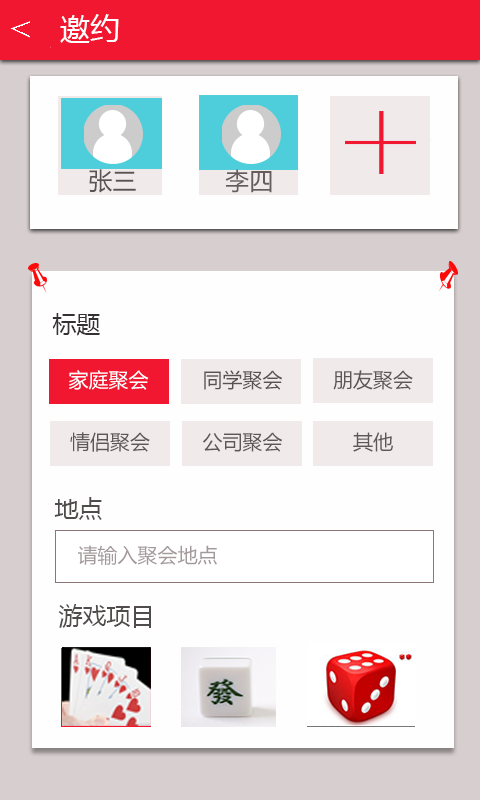
<style>
.page{position:relative;width:480px;height:800px;background:#fffefe}
.page>*{position:absolute;margin:0}
.t1{font:30px "MicrosoftYaHei";color:#ffffff}
.t2{font:24px "MicrosoftYaHei";color:#5a5253}
.t3{font:24px "MicrosoftYaHei";color:#655d5d}
.t4{font:24px "MicrosoftYaHei";color:#353031}
.t5{font:20px "MicrosoftYaHei";color:#ffffff}
.t6{font:20px "MicrosoftYaHei";color:#595253}
.t7{font:20px "MicrosoftYaHei";color:#5e5657}
.t8{font:24px "MicrosoftYaHei";color:#504c4c}
.t9{font:20px "MicrosoftYaHei";color:#a3999b}
</style>
<div class="page">
<p class="t1" style="left:60px;top:14px;width:59px;height:29px">邀约</p>
<p class="t2" style="left:89px;top:169px;width:47px;height:24px">张三</p>
<p class="t3" style="left:225px;top:169px;width:47px;height:24px">李四</p>
<p class="t4" style="left:52px;top:313px;width:48px;height:23px">标题</p>
<p class="t5" style="left:69px;top:370px;width:80px;height:20px">家庭聚会</p>
<p class="t6" style="left:204px;top:370px;width:79px;height:20px">同学聚会</p>
<p class="t7" style="left:333px;top:370px;width:80px;height:20px">朋友聚会</p>
<p class="t7" style="left:70px;top:432px;width:80px;height:20px">情侣聚会</p>
<p class="t7" style="left:203px;top:432px;width:80px;height:20px">公司聚会</p>
<p class="t7" style="left:353px;top:432px;width:40px;height:20px">其他</p>
<p class="t8" style="left:54px;top:497px;width:48px;height:23px">地点</p>
<p class="t9" style="left:78px;top:545px;width:139px;height:20px">请输入聚会地点</p>
<p class="t8" style="left:58px;top:604px;width:93px;height:24px">游戏项目</p>
</div>
